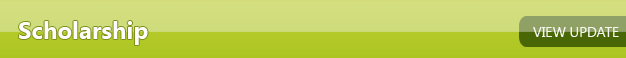
<style>
.page{position:relative;width:626px;height:58px}
.page>*{position:absolute;margin:0}
.t1{font:24px "SegoeUI-Bold";color:#fefefe}
.t2{font:14px "SegoeUI";color:#f6f7f1}
</style>
<div class="page">
<p class="t1" style="left:19px;top:21px;width:129px;height:24px">Scholarship</p>
<p class="t2" style="left:533px;top:27px;width:86px;height:10px">VIEW UPDATE</p>
</div>
